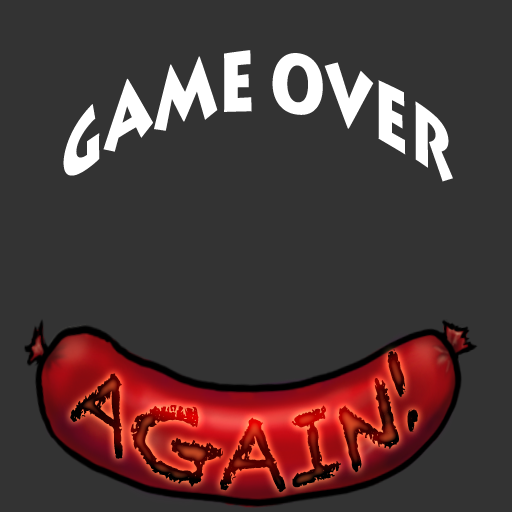
<style>
.page{position:relative;width:512px;height:512px;background:#333333}
.page>*{position:absolute;margin:0}
.t1{font:84.2px "LithosPro-Black";color:#ffffff;scale:0.68 1}
.t2{font:60px/114px "Chalkduster";scale:1.2 1}
</style>
<div class="page">
<p class="t1" style="left:63px;top:50px;width:390px;height:132px">GAME OVER</p>
<p class="t2" style="left:70px;top:349px;width:348px;height:144px;text-align:center">AGAIN!</p>
</div>
